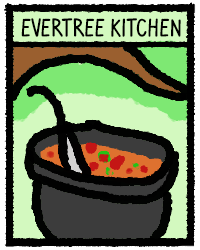
<style>
.page{position:relative;width:200px;height:250px;background:#d3f9bf}
.page>*{position:absolute;margin:0}
.t1{font:26px "VenturaEdding-Medium";color:#000000}
</style>
<div class="page">
<p class="t1" style="left:21px;top:18px;width:160px;height:19px">Evertree Kitchen</p>
</div>
